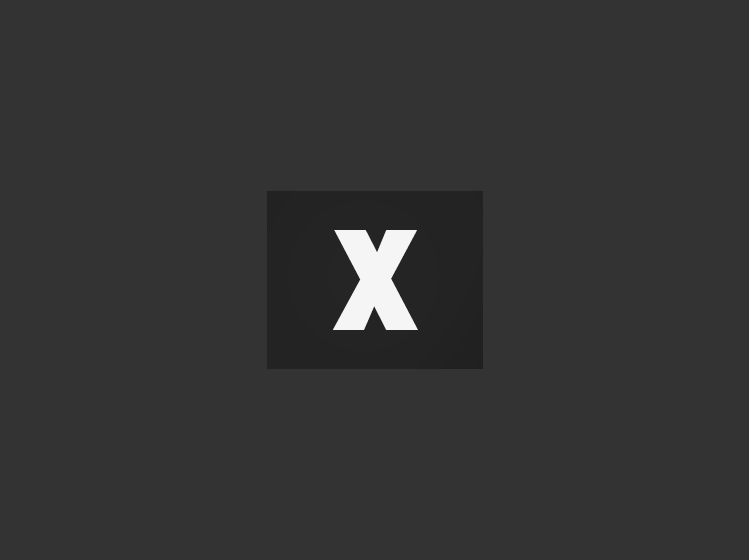
<style>
.page{position:relative;width:749px;height:560px;background:#333333}
.page>*{position:absolute;margin:0}
.t1{font:150px "Bauhaus93";color:#f5f5f5;font-variant:small-caps}
</style>
<div class="page">
<p class="t1" style="left:333px;top:230px;width:85px;height:100px">X</p>
</div>
